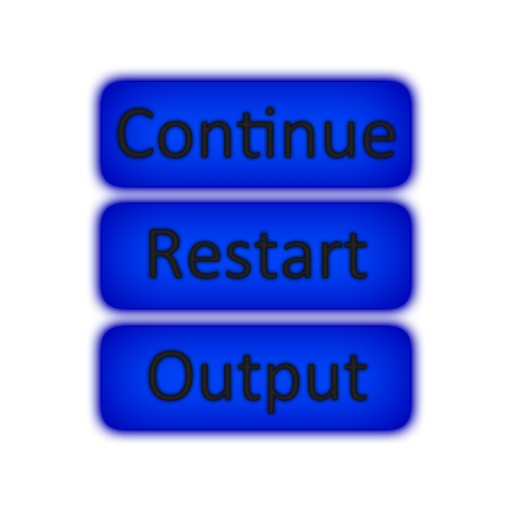
<style>
.page{position:relative;width:512px;height:512px;background:#ffffff}
.page>*{position:absolute;margin:0}
.t1{font:77px "Calibri";color:#1d1d1d}
</style>
<div class="page">
<p class="t1" style="left:117px;top:107px;width:278px;height:52px">Continue</p>
<p class="t1" style="left:149px;top:229px;width:218px;height:50px">Restart</p>
<p class="t1" style="left:149px;top:350px;width:218px;height:64px">Output</p>
</div>
